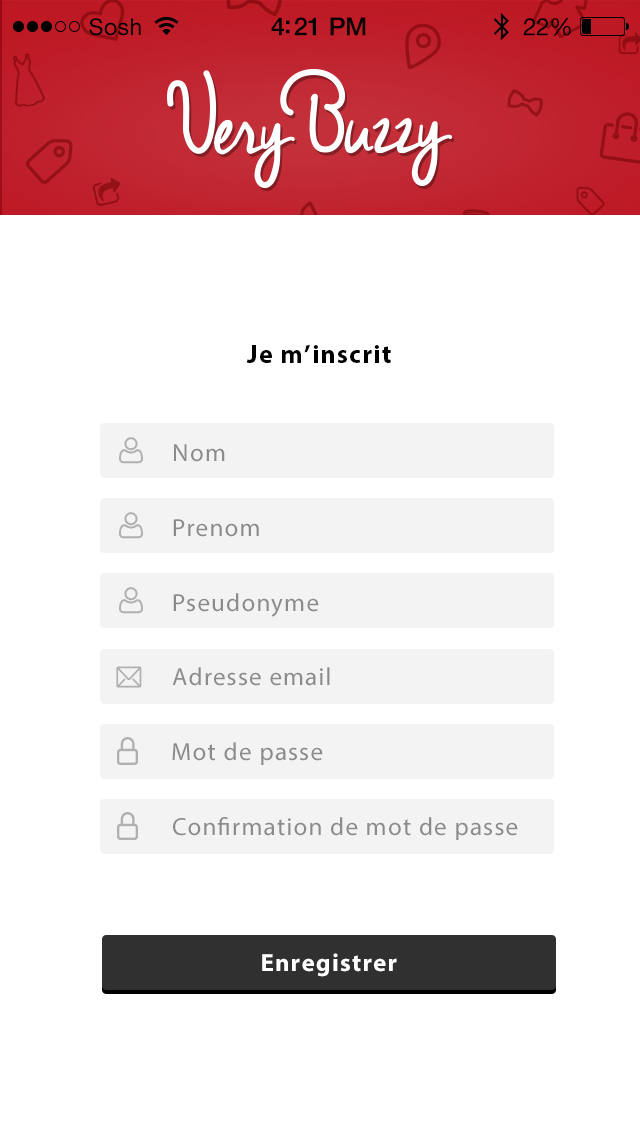
<style>
.page{position:relative;width:640px;height:1139px;background:#ffffff}
.page>*{position:absolute;margin:0}
.t1{font:25px "HelveticaNeue-Medium";letter-spacing:-0.02em;color:#000000}
.t2{font:23px "HelveticaNeue";letter-spacing:0.02em;color:#000000}
.t3{font:24px "HelveticaNeue";letter-spacing:-0.02em;color:#000000}
.t4{font:26px "MyriadPro-Bold";letter-spacing:0.05em;color:#000000}
.t5{font:25px "MyriadPro-Regular";letter-spacing:0.05em;color:#8b8b8b}
.t6{font:25px "MyriadPro-Bold";letter-spacing:0.05em;color:#ffffff}
</style>
<div class="page">
<p class="t1" style="left:271px;top:17px;width:95px;height:19px">4:21 PM</p>
<p class="t2" style="left:89px;top:18px;width:52px;height:18px">Sosh</p>
<p class="t3" style="left:523px;top:18px;width:48px;height:18px">22%</p>
<p class="t4" style="left:247px;top:345px;width:144px;height:18px">Je m’inscrit</p>
<p class="t5" style="left:174px;top:444px;width:51px;height:18px">Nom</p>
<p class="t5" style="left:173px;top:519px;width:86px;height:18px">Prenom</p>
<p class="t5" style="left:173px;top:593px;width:146px;height:24px">Pseudonyme</p>
<p class="t5" style="left:172px;top:667px;width:158px;height:19px">Adresse email</p>
<p class="t5" style="left:172px;top:742px;width:151px;height:23px">Mot de passe</p>
<p class="t5" style="left:173px;top:817px;width:345px;height:23px">Confirmation de mot de passe</p>
<p class="t6" style="left:262px;top:953px;width:135px;height:24px">Enregistrer</p>
</div>
